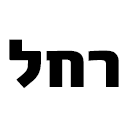
<style>
.page{position:relative;width:128px;height:128px;background:#ffffff}
.page>*{position:absolute;margin:0}
.t1{font:75.3px "FbAlbatros-Black";color:#000000}
</style>
<div class="page">
<p class="t1" style="left:9px;top:39px;width:110px;height:50px">רחל</p>
</div>
